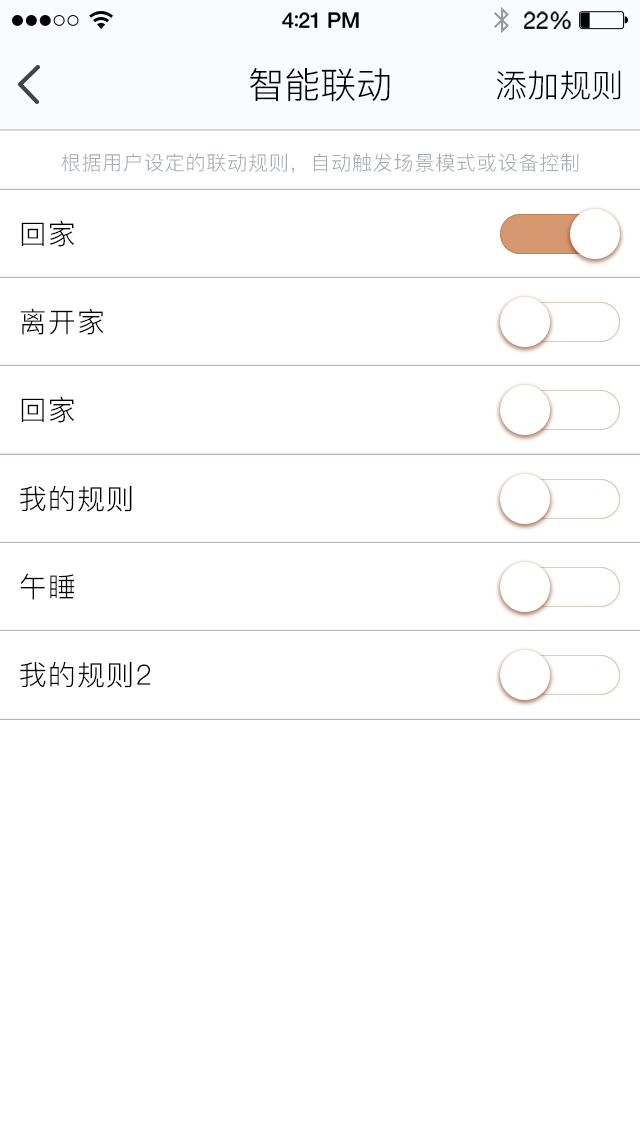
<style>
.page{position:relative;width:640px;height:1136px;background:#ffffff}
.page>*{position:absolute;margin:0}
.t1{font:36px "PingFang-SC-Regular";color:#000000}
.t2{font:32px "PingFang-SC-Regular";color:#000000}
.t3{font:20px "PingFang-SC-Regular";letter-spacing:0.04em;color:#a7a9b5}
.t4{font:28px "PingFang-SC-Regular";letter-spacing:0.04em;color:#000000}
</style>
<div class="page">
<p class="t1" style="left:250px;top:68px;width:140px;height:34px">智能联动</p>
<p class="t2" style="left:496px;top:70px;width:125px;height:30px">添加规则</p>
<p class="t3" style="left:61px;top:153px;width:518px;height:20px">根据用户设定的联动规则，自动触发场景模式或设备控制</p>
<p class="t4" style="left:21px;top:220px;width:53px;height:27px">回家</p>
<p class="t4" style="left:20px;top:308px;width:84px;height:27px">离开家</p>
<p class="t4" style="left:21px;top:396px;width:53px;height:27px">回家</p>
<p class="t4" style="left:20px;top:486px;width:112px;height:26px">我的规则</p>
<p class="t4" style="left:20px;top:573px;width:55px;height:27px">午睡</p>
<p class="t4" style="left:20px;top:662px;width:131px;height:26px">我的规则2</p>
</div>
